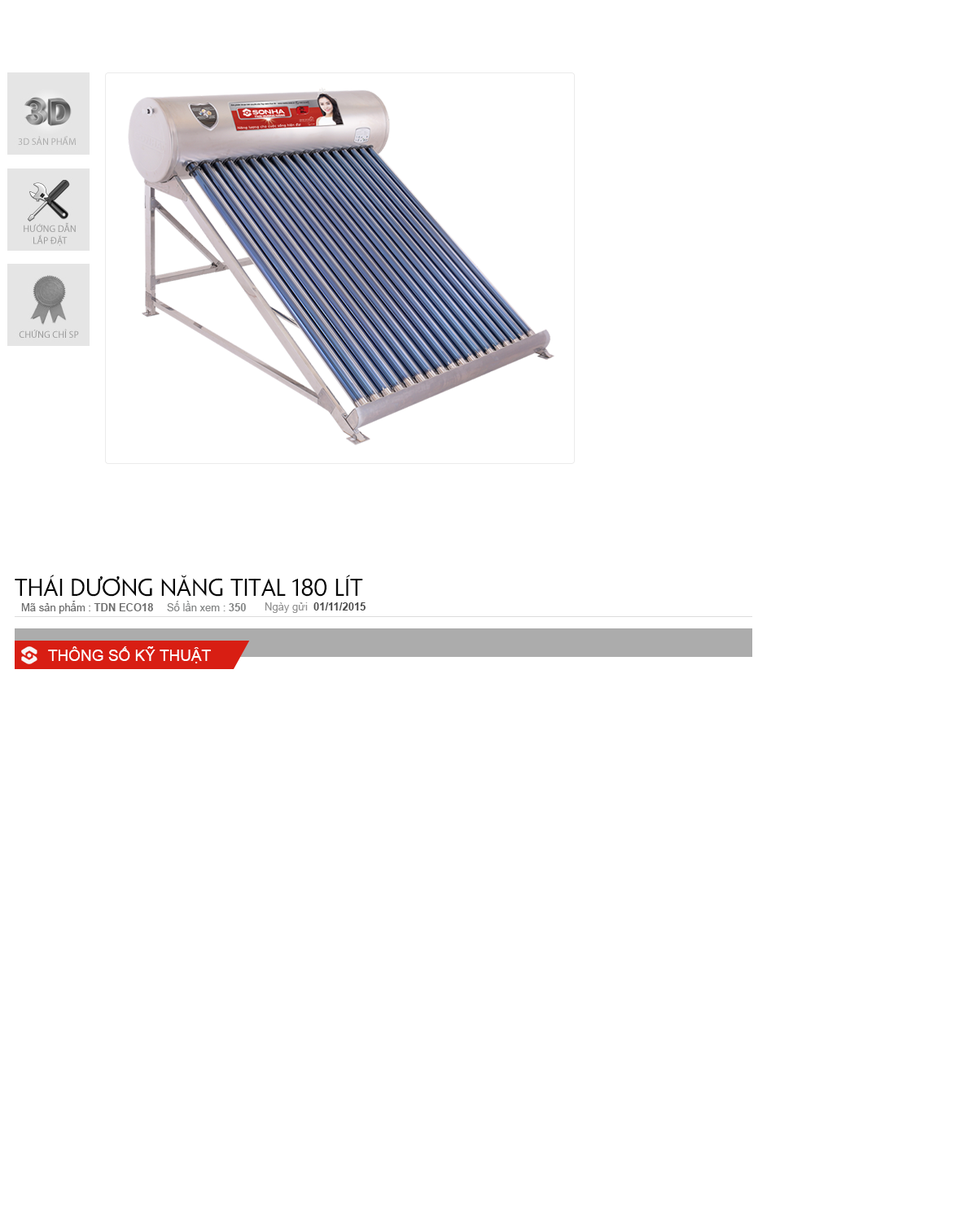
<style>
.page{position:relative;width:977px;height:1221px;background:#ffffff}
.page>*{position:absolute;margin:0}
.t1{font:22px "UTM-Penumbra";color:#060606}
.t2{font:10.6px "ArialMT";color:#6d6d6d}
.t3{font:10.6px "Arial-BoldMT";color:#6d6d6d}
.t4{font:10.6px "ArialMT";color:#838585}
.t5{font:10.6px "Arial-BoldMT";color:#838585}
.t6{font:10.6px "Arial-BoldMT";color:#484848}
.t7{font:10.6px "ArialMT";color:#949494}
.t8{font:15.5px "ArialMT";color:#ffffff}
</style>
<div class="page">
<p class="t1" style="left:15px;top:575px;width:348px;height:22px">THÁI DƯƠNG NĂNG TITAL 180 LÍT</p>
<p class="t2" style="left:21px;top:601px;width:132px;height:13px">Mã sản phẩm : <span class="t3">TDN ECO18</span></p>
<p class="t4" style="left:167px;top:601px;width:79px;height:10px">Số lần xem : <span class="t5">350</span></p>
<p class="t6" style="left:265px;top:602px;width:100px;height:11px"><span class="t7">Ngày gửi  </span>01/11/2015</p>
<p class="t8" style="left:48px;top:646px;width:163px;height:17px">THÔNG SỐ KỸ THUẬT</p>
</div>
